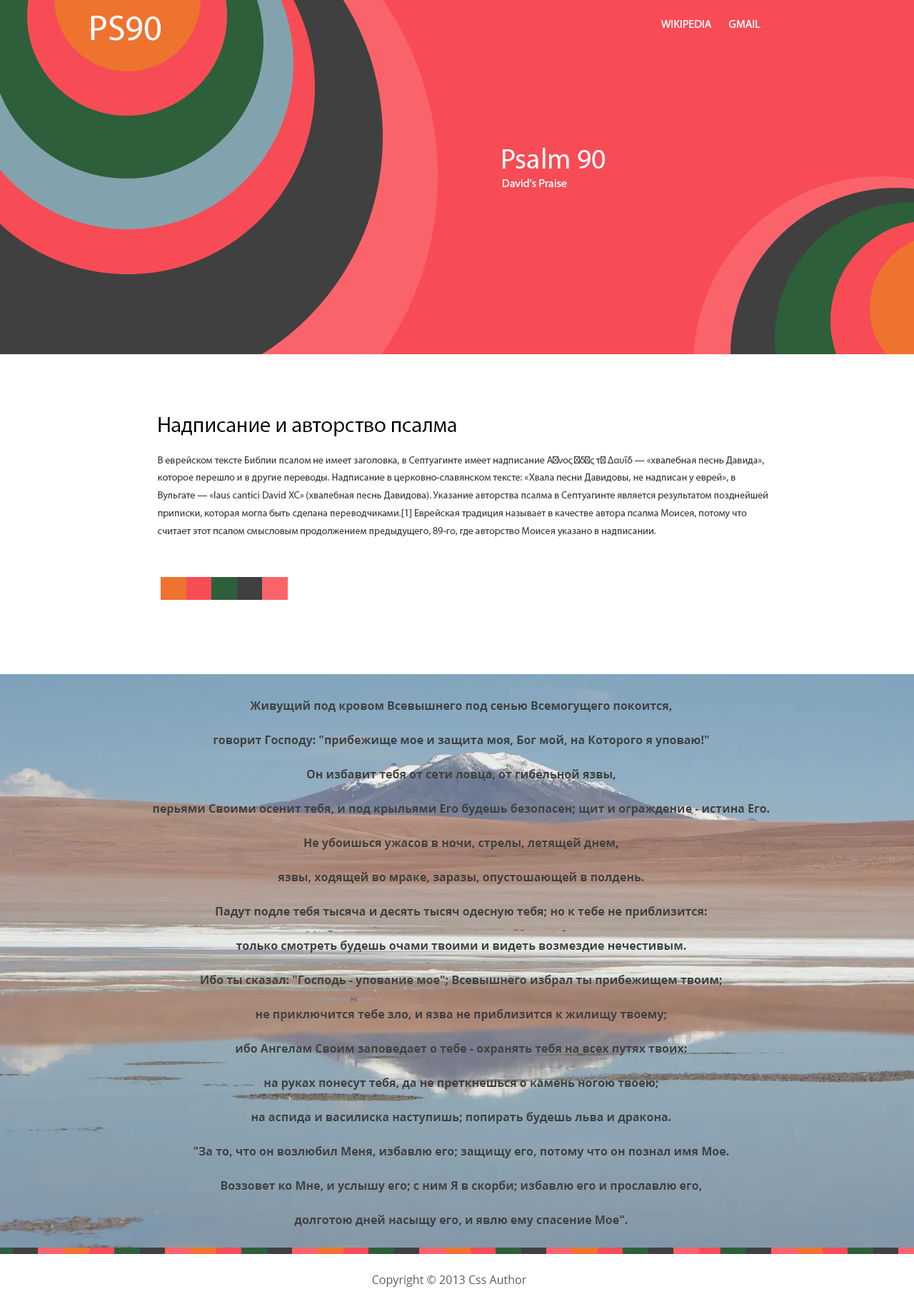
<style>
.page{position:relative;width:914px;height:1304px;background:#ffffff}
.page>*{position:absolute;margin:0}
.t1{font:35.7px "MyriadPro-Regular";color:#ffffff}
.t2{font:11.5px "MyriadPro-Regular";color:#ffffff;text-transform:uppercase}
.t3{font:28.6px "MyriadPro-Regular";color:#ffffff}
.t4{font:11.5px "MyriadPro-Regular";color:#ffffff}
.t5{font:21.5px "MyriadPro-Regular";color:#000000}
.t6{font:10px/17.7px "MyriadPro-Regular";color:#404040}
.t7{font:11.4px/34.3px "OpenSans-Bold";color:#404040}
.t8{font:11.5px "OpenSans";color:#585858}
</style>
<div class="page">
<p class="t1" style="left:91px;top:15px;width:70px;height:26px">PS90</p>
<p class="t2" style="left:661px;top:20px;width:100px;height:8px">wikipedia       gmail</p>
<p class="t3" style="left:503px;top:148px;width:102px;height:21px">Psalm 90</p>
<p class="t4" style="left:503px;top:179px;width:64px;height:8px">David's Praise</p>
<p class="t5" style="left:159px;top:417px;width:297px;height:19px">Надписание и авторство псалма</p>
<p class="t6" style="left:158px;top:456px;width:610px;height:81px">В еврейском тексте Библии псалом не имеет заголовка, в Септуагинте имеет надписание Αἶνος ᾠδῆς τῷ Δαυΐδ — «хвалебная песнь Давида», которое перешло и в другие переводы. Надписание в церковно-славянском тексте: «Хвала песни Давидовы, не надписан у еврей», в Вульгате — «laus cantici David XC» (хвалебная песнь Давидова). Указание авторства псалма в Септуагинте является результатом позднейшей приписки, которая могла быть сделана переводчиками.[1] Еврейская традиция называет в качестве автора псалма Моисея, потому что считает этот псалом смысловым продолжением предыдущего, 89-го, где авторство Моисея указано в надписании.</p>
<p class="t7" style="left:153px;top:701px;width:617px;height:526px;text-align:center">Живущий под кровом Всевышнего под сенью Всемогущего покоится,<br>говорит Господу: "прибежище мое и защита моя, Бог мой, на Которого я уповаю!"<br>Он избавит тебя от сети ловца, от гибельной язвы,<br>перьями Своими осенит тебя, и под крыльями Его будешь безопасен; щит и ограждение - истина Его.<br>Не убоишься ужасов в ночи, стрелы, летящей днем,<br>язвы, ходящей во мраке, заразы, опустошающей в полдень.<br>Падут подле тебя тысяча и десять тысяч одесную тебя; но к тебе не приблизится:<br>только смотреть будешь очами твоими и видеть возмездие нечестивым.<br>Ибо ты сказал: "Господь - упование мое"; Всевышнего избрал ты прибежищем твоим;<br>не приключится тебе зло, и язва не приблизится к жилищу твоему;<br>ибо Ангелам Своим заповедает о тебе - охранять тебя на всех путях твоих:<br>на руках понесут тебя, да не преткнешься о камень ногою твоею;<br>на аспида и василиска наступишь; попирать будешь льва и дракона.<br>"За то, что он возлюбил Меня, избавлю его; защищу его, потому что он познал имя Мое.<br>Воззовет ко Мне, и услышу его; с ним Я в скорби; избавлю его и прославлю его,<br>долготою дней насыщу его, и явлю ему спасение Мое".</p>
<p class="t8" style="left:372px;top:1275px;width:154px;height:12px">Copyright © 2013 Css Author</p>
</div>
